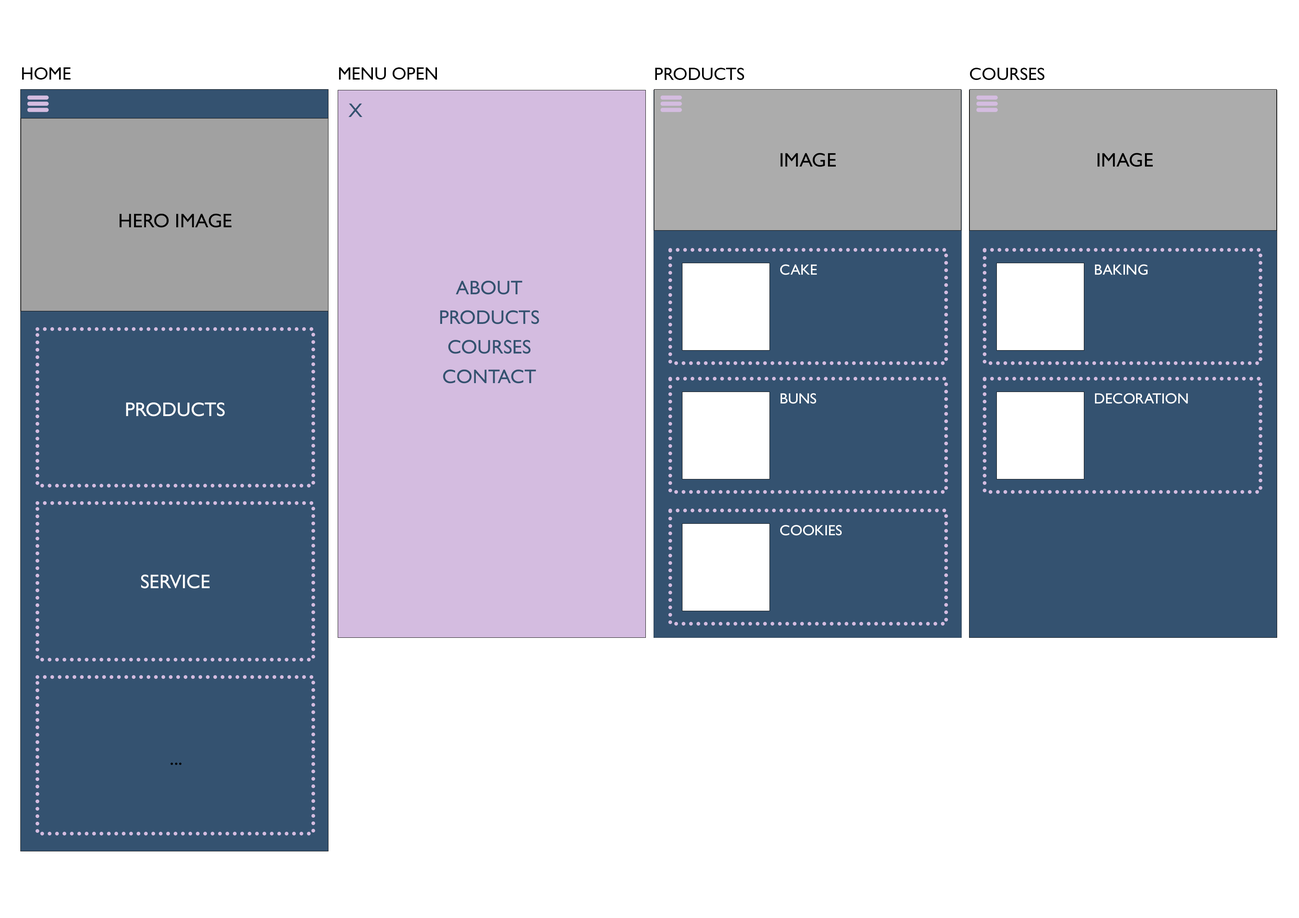
<style>
.page{position:relative;width:1299px;height:918px;background:#ffffff}
.page>*{position:absolute;margin:0}
.t1{font:17.8px "GillSansMT";color:#000000;text-transform:uppercase}
.t2{font:19.7px "GillSansMT";color:#345270;text-transform:uppercase}
.t3{font:19.7px "GillSansMT";color:#000000;text-transform:uppercase}
.t4{font:14.8px "GillSansMT";color:#ffffff;text-transform:uppercase}
.t5{font:19.7px/29.6px "GillSansMT";color:#345270;text-transform:uppercase}
.t6{font:19.7px "GillSansMT";color:#ffffff;text-transform:uppercase}
</style>
<div class="page">
<p class="t1" style="left:22px;top:67px;width:49px;height:13px">Home</p>
<p class="t1" style="left:339px;top:67px;width:98px;height:13px">Menu Open</p>
<p class="t1" style="left:655px;top:68px;width:89px;height:12px">Products</p>
<p class="t1" style="left:970px;top:68px;width:74px;height:12px">Courses</p>
<p class="t2" style="left:348px;top:103px;width:14px;height:14px">X</p>
<p class="t3" style="left:780px;top:153px;width:56px;height:14px">Image</p>
<p class="t3" style="left:1097px;top:153px;width:55px;height:14px">Image</p>
<p class="t3" style="left:120px;top:214px;width:111px;height:14px">Hero Image</p>
<p class="t4" style="left:780px;top:264px;width:37px;height:11px">Cake</p>
<p class="t4" style="left:1095px;top:264px;width:52px;height:11px">Baking</p>
<p class="t5" style="left:440px;top:281px;width:99px;height:103px;text-align:center">About<br>Products<br>courses<br>Contact</p>
<p class="t4" style="left:780px;top:393px;width:36px;height:11px">Buns</p>
<p class="t4" style="left:1095px;top:393px;width:93px;height:11px">Decoration</p>
<p class="t6" style="left:126px;top:402px;width:99px;height:14px">Products</p>
<p class="t4" style="left:780px;top:525px;width:62px;height:11px">Cookies</p>
<p class="t6" style="left:141px;top:575px;width:69px;height:14px">service</p>
<p class="t3" style="left:170px;top:763px;width:11px;height:2px">...</p>
</div>
